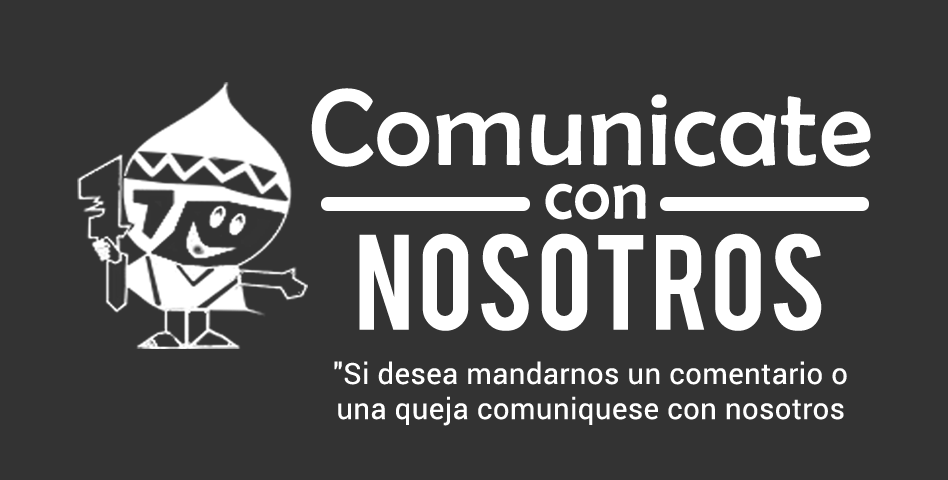
<style>
.page{position:relative;width:948px;height:480px;background:#333333}
.page>*{position:absolute;margin:0}
.t1{font:109.3px "BerlinSansFB-Reg";letter-spacing:0.015em;color:#ffffff}
.t2{font:71px "BerlinSansFB-Reg";letter-spacing:0.015em;color:#ffffff}
.t3{font:106.2px "Bebas";letter-spacing:0.015em;color:#ffffff}
.t4{font:29.2px "Roboto-Regular";letter-spacing:0.015em;color:#ffffff}
</style>
<div class="page">
<p class="t1" style="left:311px;top:88px;width:560px;height:79px">Comunicate</p>
<p class="t2" style="left:545px;top:183px;width:101px;height:37px">con</p>
<p class="t3" style="left:359px;top:233px;width:463px;height:98px">Nosotros</p>
<p class="t4" style="left:334px;top:361px;width:513px;height:65px;text-align:center">"Si desea mandarnos un comentario o una queja comuniquese con nosotros</p>
</div>
